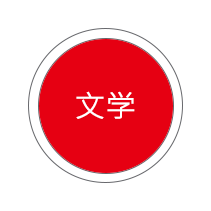
<style>
.page{position:relative;width:211px;height:211px;background:#ffffff}
.page>*{position:absolute;margin:0}
.t1{font:30px "MicrosoftJhengHeiUIRegular";color:#ffffff;font-weight:bold}
</style>
<div class="page">
<p class="t1" style="left:76px;top:91px;width:59px;height:28px">文学</p>
</div>
